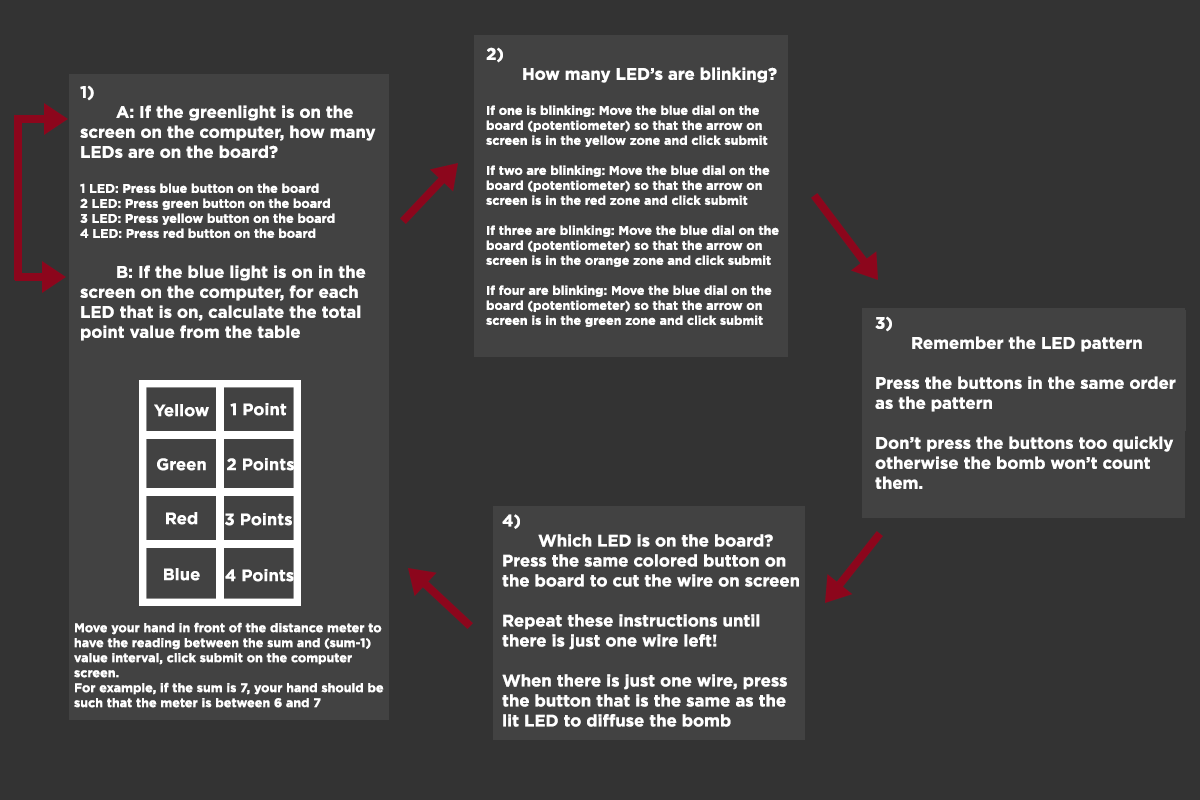
<style>
.page{position:relative;width:1200px;height:800px;background:#333333}
.page>*{position:absolute;margin:0}
.t1{font:12.5px "Gotham-Bold";color:#ffffff}
.t2{font:16.7px "Gotham-Bold";color:#ffffff}
</style>
<div class="page">
<p class="t1" style="left:80px;top:85px;width:296px;height:256px"><span class="t2">1)<br> A: If the greenlight is on the screen on the computer, how many LEDs are on the board?<br> <br></span>1 LED: Press blue button on the board<br>2 LED: Press green button on the board<br>3 LED: Press yellow button on the board<br>4 LED: Press red button on the board<br><span class="t2"><br> B: If the blue light is on in the screen on the computer, for each LED that is on, calculate the total point value from the table</span></p>
<p class="t2" style="left:875px;top:316px;width:301px;height:173px">3)<br> Remember the LED pattern<br><br>Press the buttons in the same order as the pattern<br><br>Don’t press the buttons too quickly otherwise the bomb won’t count them.</p>
<p class="t2" style="left:502px;top:514px;width:297px;height:213px">4)<br> Which LED is on the board? Press the same colored button on the board to cut the wire on screen<br><br>Repeat these instructions until there is just one wire left!<br><br>When there is just one wire, press the button that is the same as the lit LED to diffuse the bomb</p>
<p class="t1" style="left:74px;top:622px;width:310px;height:86px">Move your hand in front of the distance meter to have the reading between the sum and (sum-1) value interval, click submit on the computer screen. <br>For example, if the sum is 7, your hand should be such that the meter is between 6 and 7</p>
</div>
